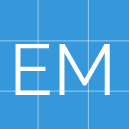
<style>
.page{position:relative;width:129px;height:129px;background:#3498db}
.page>*{position:absolute;margin:0}
.t1{font:72px "Raleway-Regular";color:#ffffff}
</style>
<div class="page">
<p class="t1" style="left:15px;top:44px;width:95px;height:51px">EM</p>
</div>
